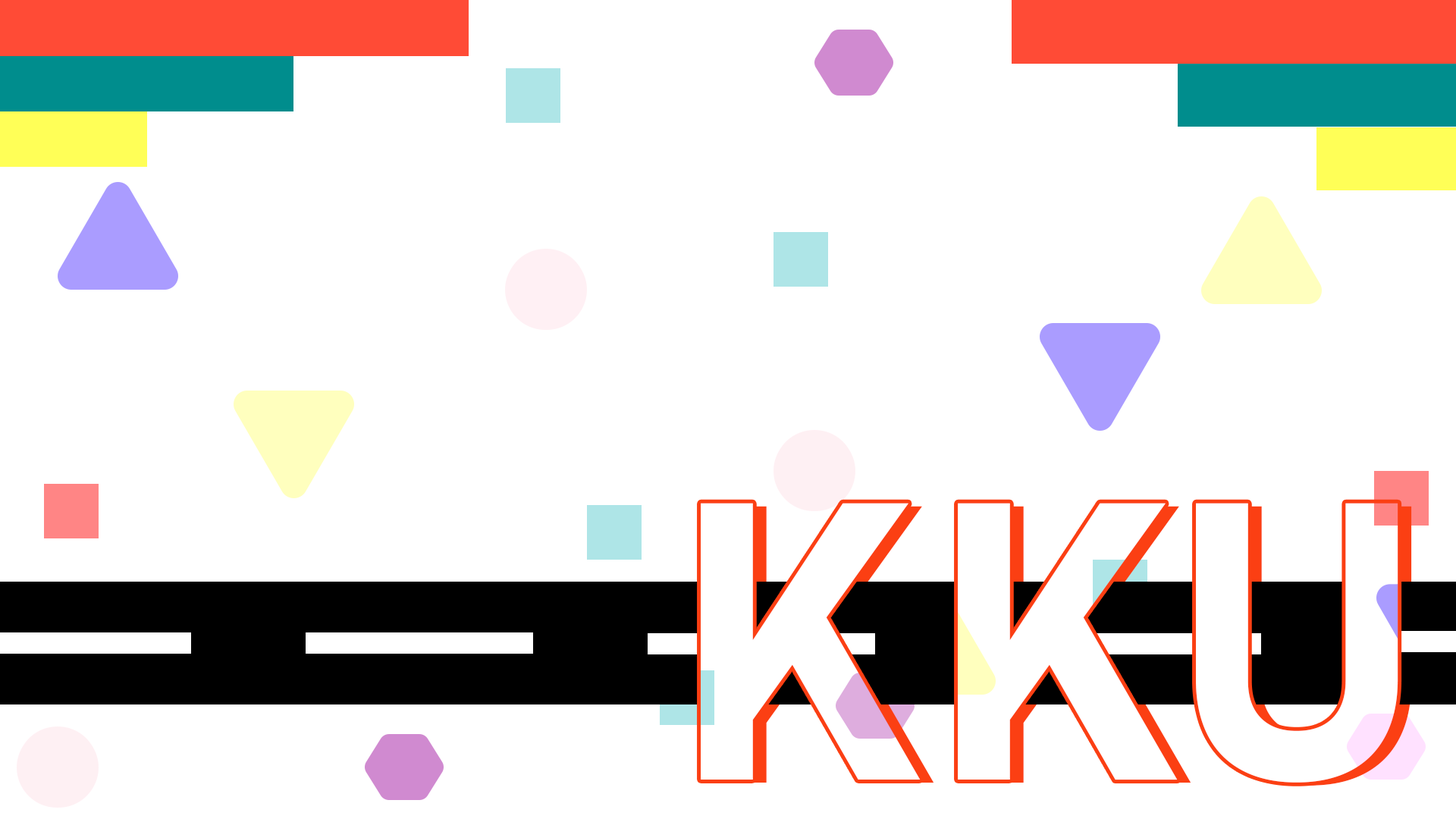
<style>
.page{position:relative;width:1456px;height:819px;background:#ffffff}
.page>*{position:absolute;margin:0}
.t1{font:389px "Bahnschrift-Bold";letter-spacing:0.01em;color:#ffffff}
</style>
<div class="page">
<p class="t1" style="left:701px;top:503px;width:697px;height:280px">KKU</p>
</div>
